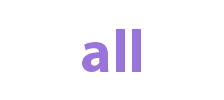
<style>
.page{position:relative;width:224px;height:100px;background:#ffffff}
.page>*{position:absolute;margin:0}
.t1{font:60px "MyriadPro-Bold";color:#9a75d9}
</style>
<div class="page">
<p class="t1" style="left:82px;top:29px;width:59px;height:43px">all</p>
</div>
